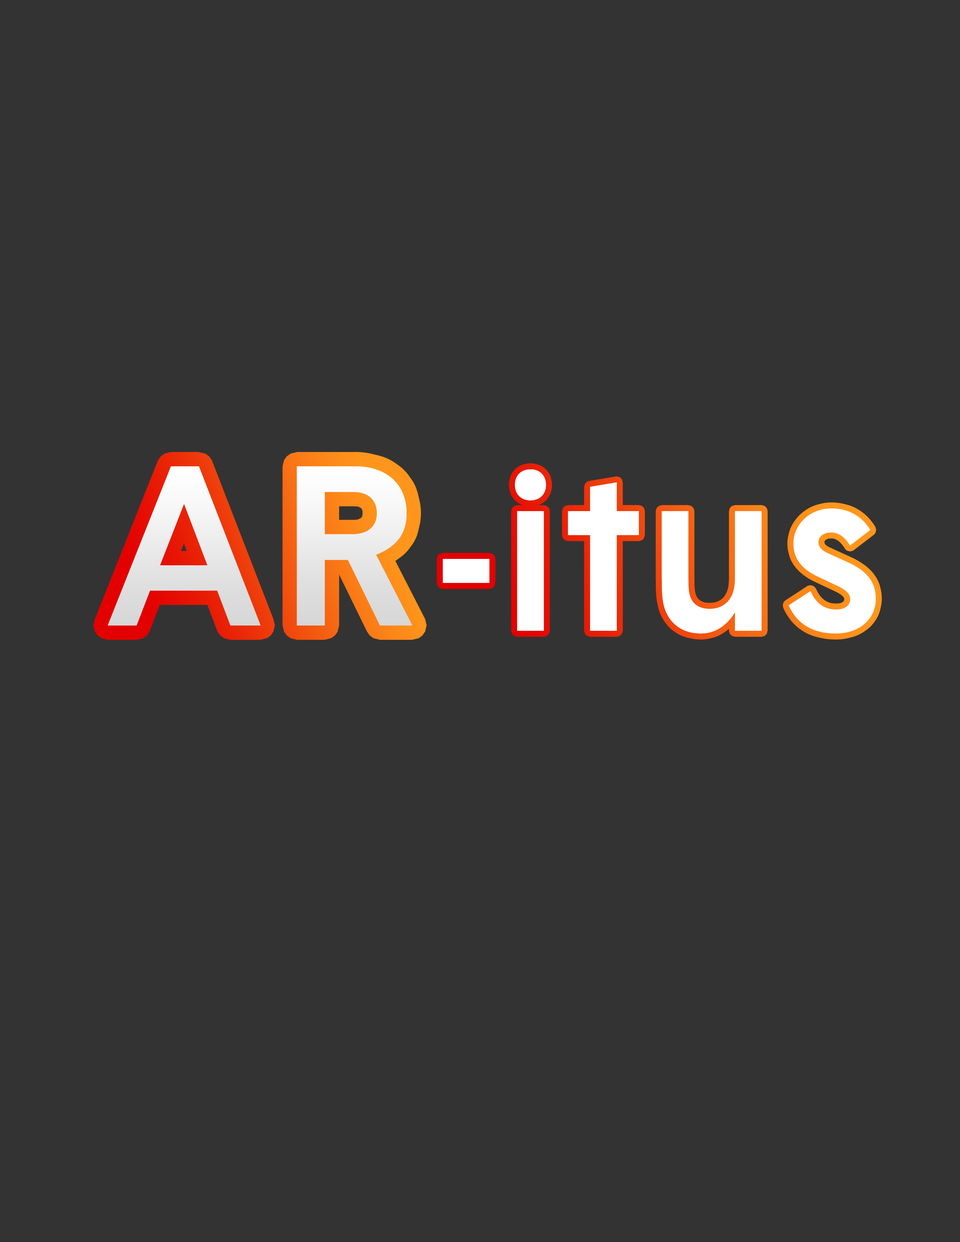
<style>
.page{position:relative;width:960px;height:1242px;background:#333333}
.page>*{position:absolute;margin:0}
.t1{font:221.2px "Basetica-Med";letter-spacing:0.1em;color:#eaeaea}
.t2{font:221.2px "Basetica-Med";letter-spacing:0.05em;color:#ffffff}
.t3{font:221.2px "Basetica-Med";letter-spacing:0.05em;color:#000000}
</style>
<div class="page">
<p class="t1" style="left:108px;top:466px;width:305px;height:160px">AR</p>
<p class="t2" style="left:443px;top:469px;width:433px;height:165px"><span class="t3">      </span>-itus</p>
</div>
